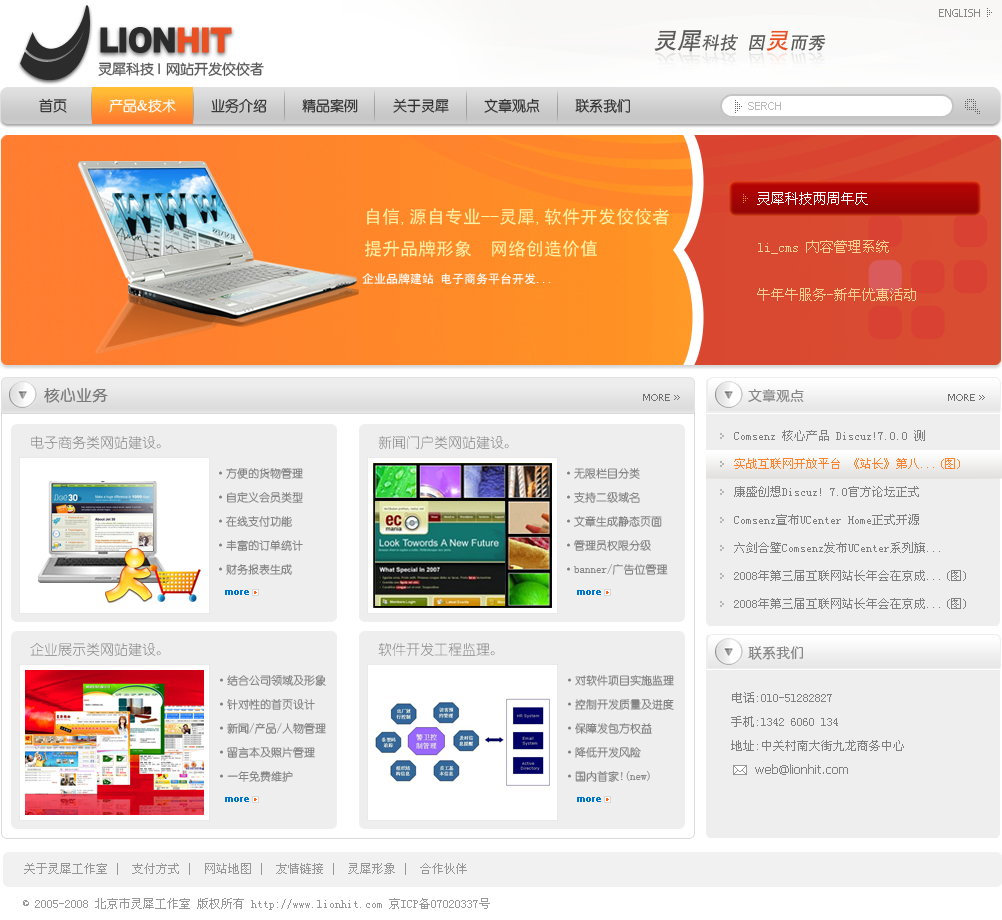
<style>
.page{position:relative;width:1002px;height:920px;background:#eeeeee}
.page>*{position:absolute;margin:0}
.t1{font:11px "Tahoma";color:#898989}
.t2{font:34.7px "Arial-Black";letter-spacing:-0.05em;color:#2c2b2c;scale:0.88 1}
.t3{font:34.7px "Arial-Black";letter-spacing:-0.05em;color:#e95023;scale:0.88 1}
.t4{font:18px "FZHTJW--GB1-0";color:#585858;font-style:italic}
.t5{font:24px "FZHTJW--GB1-0";color:#585858;font-style:italic}
.t6{font:24px "FZHTJW--GB1-0";color:#e95023;font-style:italic}
.t7{font:14px "FZY3JW--GB1-0";color:#585858}
.t8{font:14px "ç»å¸åä½ç®-regular";color:#2e2e2e}
.t9{font:14px "ç»å¸åä½ç®-regular";color:#ffffff}
.t10{font:11px "ArialMT";color:#b9b9b9}
.t11{font:14px/48px "SimSun";color:#ffd190}
.t12{font:14px/48px "SimSun";color:#ffffff}
.t13{font:18px "SimHei";color:#fff2a7}
.t14{font:12px "SimHei";color:#ffffff}
.t15{font:16px "ç»å¸ä¸­åç®-regular";color:#7b7b7b}
.t16{font:14px "ç»å¸ä¸­åç®-regular";color:#878787}
.t17{font:10px "Tahoma";color:#707070}
.t18{font:14px "YouYuan";color:#838383}
.t19{font:12px/28px "SimSun";color:#808080}
.t20{font:12px/28px "SimSun";color:#ff832c}
.t21{font:11px/24px "YouYuan";color:#858585}
.t22{font:11px/24px "SimSun";color:#808080}
.t23{font:12px/24px "SimSun";color:#808080}
.t24{font:12px/24px "Tahoma";color:#808080}
.t25{font:12px "SimSun";color:#979797}
</style>
<div class="page">
<p class="t1" style="left:939px;top:9px;width:41px;height:8px">ENGLISH</p>
<p class="t2" style="left:100px;top:27px;width:132px;height:26px">LION<span class="t3">HIT</span></p>
<p class="t4" style="left:654px;top:30px;width:172px;height:22px"><span class="t5">灵犀</span>科技  因<span class="t6">灵</span>而秀</p>
<p class="t7" style="left:98px;top:62px;width:62px;height:14px">灵犀科技 |</p>
<p class="t7" style="left:166px;top:62px;width:98px;height:15px">网站开发佼佼者</p>
<p class="t8" style="left:39px;top:98px;width:591px;height:15px">首页      <span class="t9">产品&amp;技术</span>     业务介绍     精品案例     关于灵犀     文章观点     联系我们</p>
<p class="t10" style="left:748px;top:102px;width:33px;height:8px">SERCH</p>
<p class="t11" style="left:757px;top:192px;width:159px;height:109px"><span class="t12">灵犀科技两周年庆<br></span>li_cms 内容管理系统<br>牛年牛服务-新年优惠活动</p>
<p class="t13" style="left:364px;top:208px;width:305px;height:50px">自信,源自专业--灵犀,软件开发佼佼者<br>提升品牌形象  网络创造价值</p>
<p class="t14" style="left:362px;top:273px;width:189px;height:12px">企业品牌建站 电子商务平台开发...</p>
<p class="t15" style="left:44px;top:387px;width:64px;height:16px">核心业务</p>
<p class="t16" style="left:748px;top:389px;width:56px;height:14px">文章观点</p>
<p class="t17" style="left:643px;top:394px;width:27px;height:7px">MORE</p>
<p class="t17" style="left:948px;top:394px;width:27px;height:7px">MORE</p>
<p class="t18" style="left:31px;top:436px;width:130px;height:13px">电子商务类网站建设。</p>
<p class="t18" style="left:378px;top:435px;width:131px;height:15px">新闻门户类网站建设。</p>
<p class="t19" style="left:734px;top:430px;width:232px;height:179px">Comsenz 核心产品 Discuz!7.0.0 测 <br><span class="t20">实战互联网开放平台 《站长》第八...(图)</span> <br>康盛创想Discuz! 7.0官方论坛正式<br>Comsenz宣布UCenter Home正式开源 <br>六剑合璧Comsenz发布UCenter系列旗... <br>2008年第三届互联网站长年会在京成...(图) <br>2008年第三届互联网站长年会在京成...(图)</p>
<p class="t21" style="left:219px;top:468px;width:84px;height:107px"><span class="t22">·</span>方便的货物管理<br><span class="t22">·</span>自定义会员类型<br><span class="t22">·</span>在线支付功能<br><span class="t22">·</span>丰富的订单统计<br><span class="t22">·</span>财务报表生成</p>
<p class="t21" style="left:567px;top:468px;width:101px;height:107px"><span class="t22">·</span>无限栏目分类<br><span class="t22">·</span>支持二级域名<br><span class="t22">·</span>文章生成静态页面<br><span class="t22">·</span>管理员权限分级<br><span class="t22">·</span>banner/广告位管理</p>
<p class="t18" style="left:30px;top:643px;width:131px;height:13px">企业展示类网站建设。</p>
<p class="t18" style="left:378px;top:643px;width:117px;height:13px">软件开发工程监理。</p>
<p class="t16" style="left:748px;top:646px;width:55px;height:14px">联系我们</p>
<p class="t21" style="left:220px;top:675px;width:106px;height:107px"><span class="t22">·</span>结合公司领域及形象<br><span class="t22">·</span>针对性的首页设计<br><span class="t22">·</span>新闻/产品/人物管理<br><span class="t22">·</span>留言本及照片管理<br><span class="t22">·</span>一年免费维护</p>
<p class="t21" style="left:568px;top:675px;width:106px;height:107px"><span class="t22">·</span>对软件项目实施监理<br><span class="t22">·</span>控制开发质量及进度<br><span class="t22">·</span>保障发包方权益<br><span class="t22">·</span>降低开发风险<br><span class="t22">·</span>国内首家!(new)</p>
<p class="t23" style="left:731px;top:692px;width:173px;height:83px">电话:0l0-5l282827<br>手机:l342 6O6O l34<br>地址:中关村南大街九龙商务中心<br>    <span class="t24">web@lionhit.com</span></p>
<p class="t25" style="left:24px;top:863px;width:443px;height:12px">关于灵犀工作室 |  支付方式 |  网站地图 |  友情链接 |  灵犀形象 |  合作伙伴</p>
<p class="t25" style="left:23px;top:898px;width:467px;height:12px">© 2005-2008 北京市灵犀工作室 版权所有 http://www.lionhit.com 京ICP备07020337号</p>
</div>
